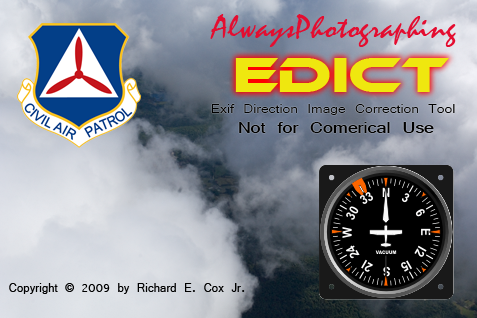
<style>
.page{position:relative;width:477px;height:318px}
.page>*{position:absolute;margin:0}
.t1{font:31.2px "CASMIRA";color:#e40d30;scale:1.15 1}
.t2{font:46.8px "Ethnocentric";color:#efe70f;scale:1.15 1}
.t3{font:18.2px "Vrinda";color:#000000;scale:1.15 1}
.t4{font:23.4px "Vrinda";color:#000000;scale:1.15 1}
.t5{font:18.2px "Vrinda";letter-spacing:0.01em;color:#000000;scale:0.92 1}
</style>
<div class="page">
<p class="t1" style="left:210px;top:14px;width:246px;height:33px">AlwaysPhotographing</p>
<p class="t2" style="left:235px;top:58px;width:214px;height:34px">EDICT</p>
<p class="t3" style="left:211px;top:104px;width:244px;height:11px">Exif Direction Image Correction Tool</p>
<p class="t4" style="left:239px;top:122px;width:195px;height:11px">Not for Comerical Use</p>
<p class="t5" style="left:9px;top:283px;width:236px;height:11px">Copyright © 2009 by Richard E. Cox Jr.</p>
</div>
